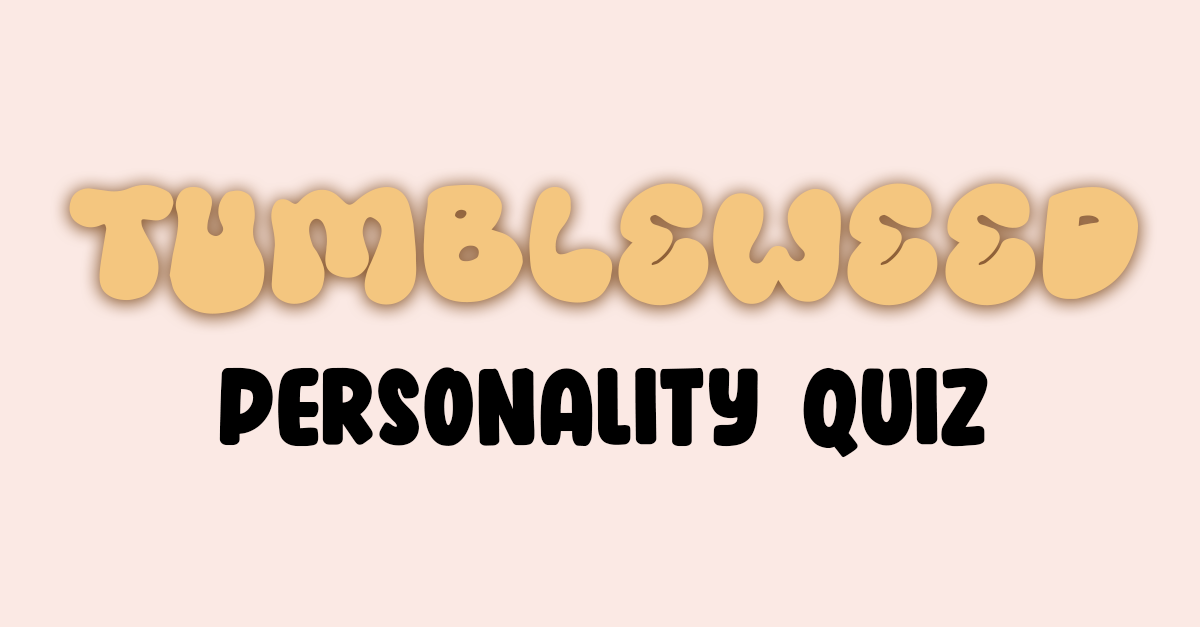
<style>
.page{position:relative;width:1200px;height:627px;background:#fbe9e4}
.page>*{position:absolute;margin:0}
.t1{font:143.6px "GroovyDayRegular";color:#f4c67f}
.t2{font:102.4px "Peach-Days";color:#000000}
</style>
<div class="page">
<p class="t1" style="left:69px;top:183px;width:1069px;height:131px">TUMBLEWEED</p>
<p class="t2" style="left:219px;top:367px;width:769px;height:91px">personality quiz</p>
</div>
